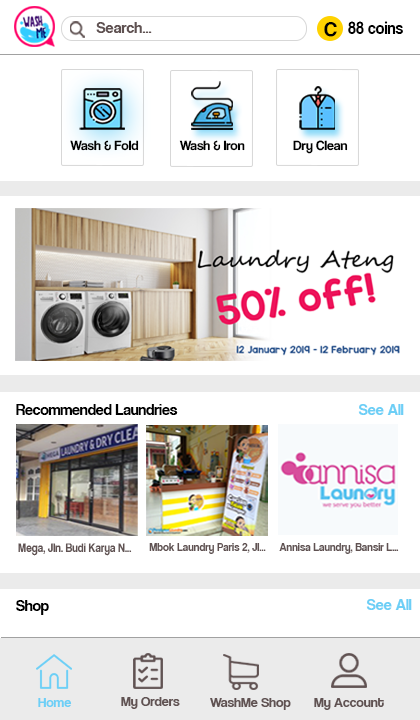
<style>
.page{position:relative;width:420px;height:720px;background:#ffffff}
.page>*{position:absolute;margin:0}
.t1{font:16px "CoolveticaRg-Regular";color:#605252}
.t2{font:21px "CoolveticaRg-Regular";color:#000000}
.t3{font:17.6px "CoolveticaRg-Regular";color:#000000;scale:0.92 1}
.t4{font:13.8px "CoolveticaRg-Regular";color:#000000}
.t5{font:15.6px "CoolveticaRg-Regular";color:#000000}
.t6{font:16px "CoolveticaRg-Regular";color:#6dcff6}
.t7{font:11.6px "CoolveticaRg-Regular";color:#605252}
.t8{font:11.4px "CoolveticaRg-Regular";color:#605252}
.t9{font:14px "CoolveticaRg-Regular";color:#6dcff6}
.t10{font:14px "CoolveticaRg-Regular";color:#605252}
</style>
<div class="page">
<p class="t1" style="left:96px;top:22px;width:56px;height:11px">Search...</p>
<p class="t2" style="left:324px;top:22px;width:13px;height:15px">C</p>
<p class="t3" style="left:348px;top:21px;width:55px;height:13px">88 coins</p>
<p class="t4" style="left:70px;top:140px;width:69px;height:11px">Wash &amp; Fold</p>
<p class="t4" style="left:179px;top:140px;width:66px;height:11px">Wash &amp; Iron</p>
<p class="t4" style="left:293px;top:140px;width:55px;height:14px">Dry Clean</p>
<p class="t5" style="left:16px;top:404px;width:162px;height:11px">Recommended Laundries</p>
<p class="t6" style="left:358px;top:404px;width:46px;height:11px">See All</p>
<p class="t7" style="left:18px;top:543px;width:114px;height:13px">Mega, Jln. Budi Karya N...</p>
<p class="t8" style="left:149px;top:543px;width:117px;height:11px">Mbok Laundry Paris 2, Jl...</p>
<p class="t8" style="left:279px;top:543px;width:120px;height:11px">Annisa Laundry, Bansir L...</p>
<p class="t5" style="left:16px;top:600px;width:33px;height:15px">Shop</p>
<p class="t6" style="left:366px;top:599px;width:46px;height:11px">See All</p>
<p class="t9" style="left:38px;top:698px;width:34px;height:9px">Home</p>
<p class="t10" style="left:121px;top:697px;width:59px;height:12px">My Orders</p>
<p class="t10" style="left:210px;top:698px;width:81px;height:12px">WashMe Shop</p>
<p class="t10" style="left:314px;top:698px;width:70px;height:12px">My Account</p>
</div>
